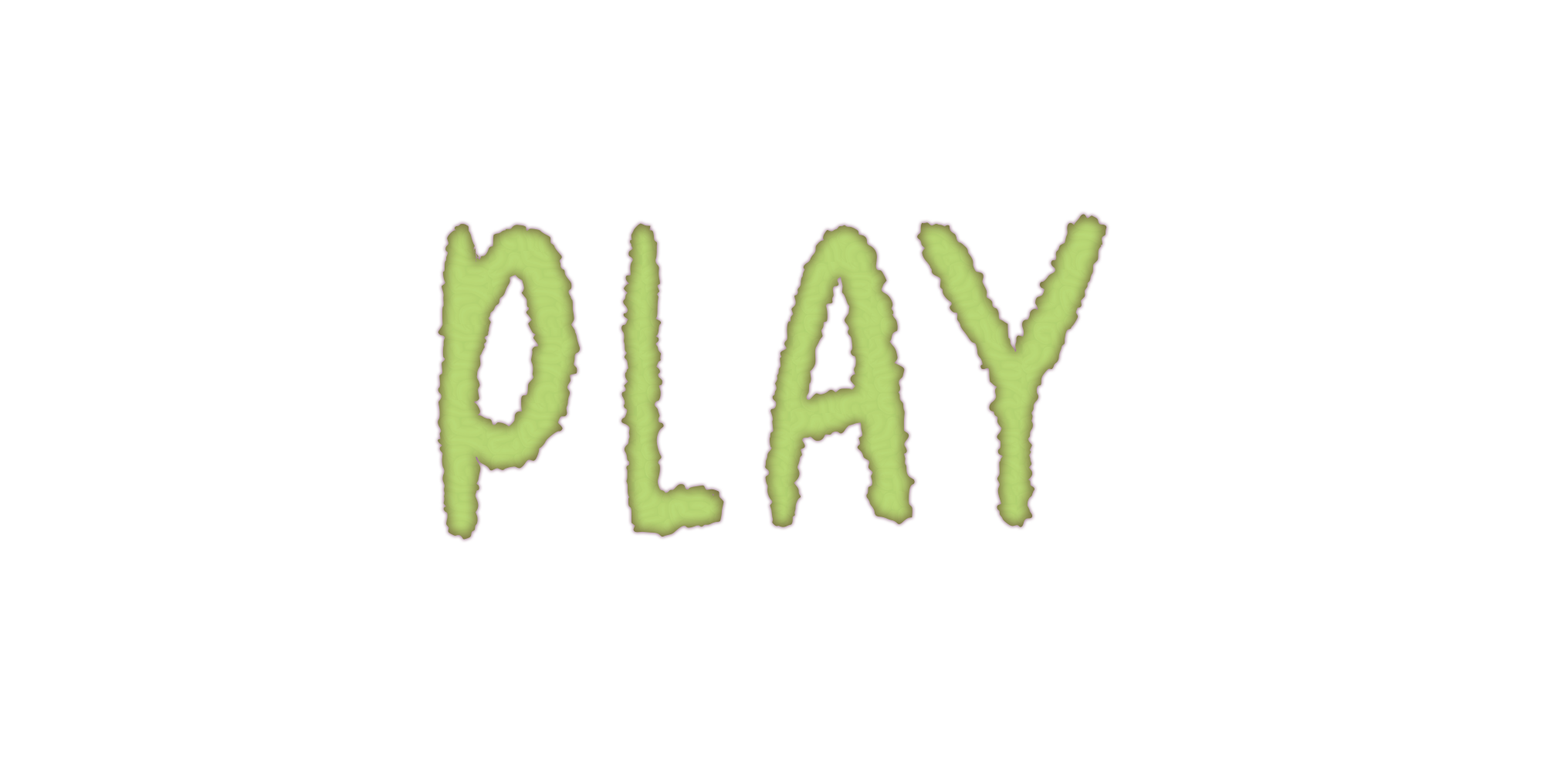
<style>
.page{position:relative;width:1544px;height:772px;background:#ffffff}
.page>*{position:absolute;margin:0}
.t1{font:321.7px "Metalien";letter-spacing:0.1em;color:#b7d974}
</style>
<div class="page">
<p class="t1" style="left:438px;top:214px;width:669px;height:326px">PLAY</p>
</div>
